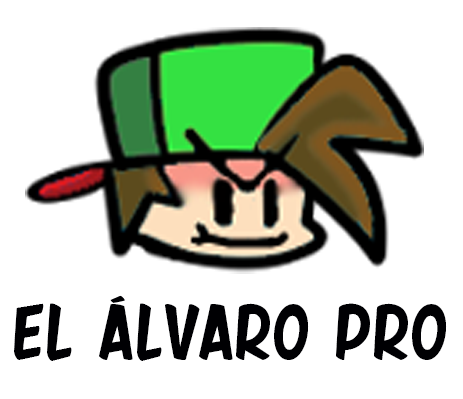
<style>
.page{position:relative;width:463px;height:399px;background:#ffffff}
.page>*{position:absolute;margin:0}
.t1{font:80px "fridaynight";color:#000003}
</style>
<div class="page">
<p class="t1" style="left:14px;top:295px;width:433px;height:66px">El Álvaro pro</p>
</div>
